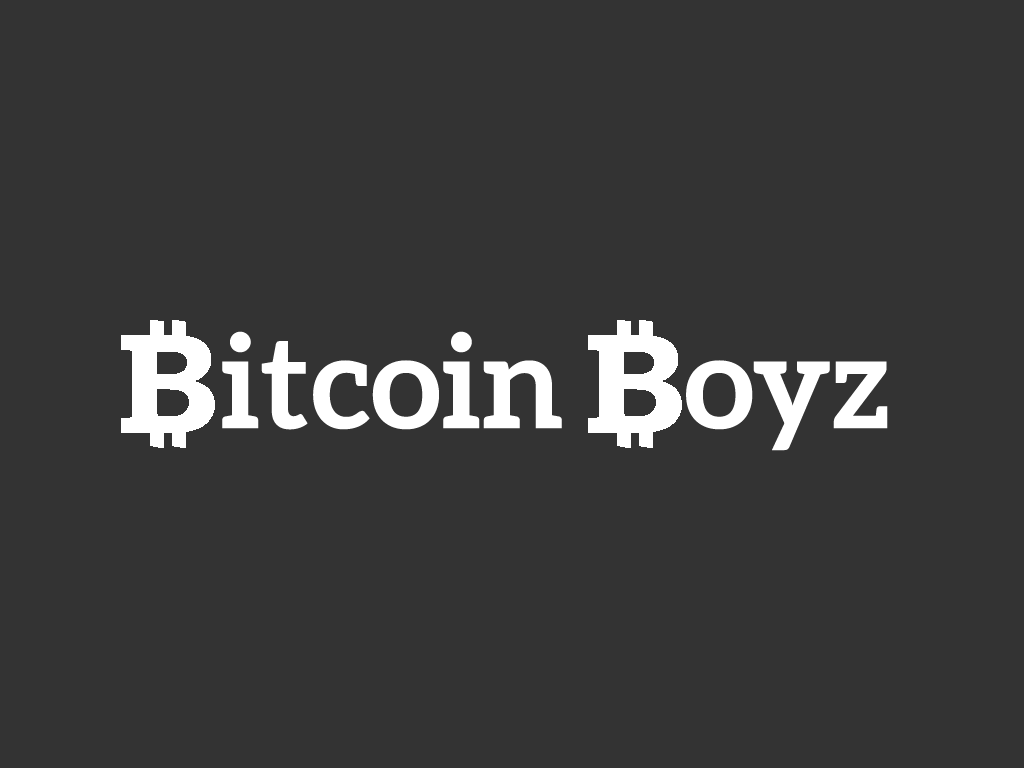
<style>
.page{position:relative;width:1024px;height:768px;background:#333333}
.page>*{position:absolute;margin:0}
.t1{font:130px "Aleo-Bold";color:#ffffff}
</style>
<div class="page">
<p class="t1" style="left:222px;top:331px;width:666px;height:120px">itcoin    oyz</p>
</div>
